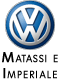
<style>
.page{position:relative;width:60px;height:79px;background:#ffffff}
.page>*{position:absolute;margin:0}
.t1{font:14px/16.1px "VWHeadlineOT-Book";letter-spacing:0.05em;color:#000000;font-variant:small-caps;font-weight:bold}
</style>
<div class="page">
<p class="t1" style="left:2px;top:52px;width:56px;height:27px;text-align:center">Matassi e<br>Imperiale</p>
</div>
